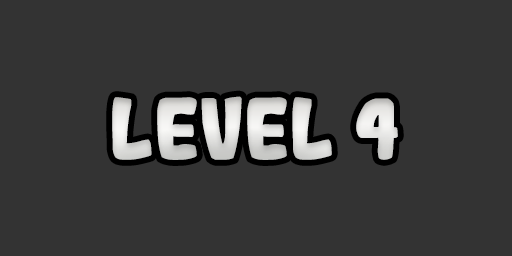
<style>
.page{position:relative;width:512px;height:256px;background:#333333}
.page>*{position:absolute;margin:0}
.t1{font:83.3px "Gogono-Cocoa-Mochi";color:#dfdedc}
</style>
<div class="page">
<p class="t1" style="left:112px;top:96px;width:286px;height:64px">LEVEL 4</p>
</div>
